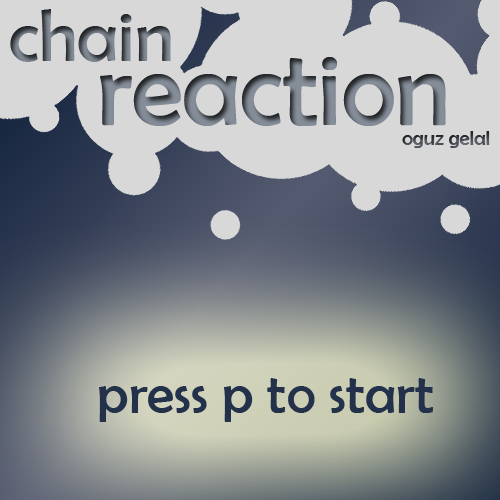
<style>
.page{position:relative;width:500px;height:500px;background:#d8d8d8}
.page>*{position:absolute;margin:0}
.t1{font:74px "BerlinSansFB-Reg"}
.t2{font:104.9px "BerlinSansFB-Reg"}
.t3{font:20.7px "BerlinSansFB-Reg"}
.t4{font:56.1px "BerlinSansFB-Reg";color:#24314a}
</style>
<div class="page">
<p class="t1" style="left:10px;top:9px;width:161px;height:53px">chain</p>
<p class="t2" style="left:100px;top:57px;width:346px;height:69px">reaction</p>
<p class="t3" style="left:402px;top:131px;width:88px;height:17px">oguz gelal</p>
<p class="t4" style="left:99px;top:378px;width:334px;height:44px">press p to start</p>
</div>
